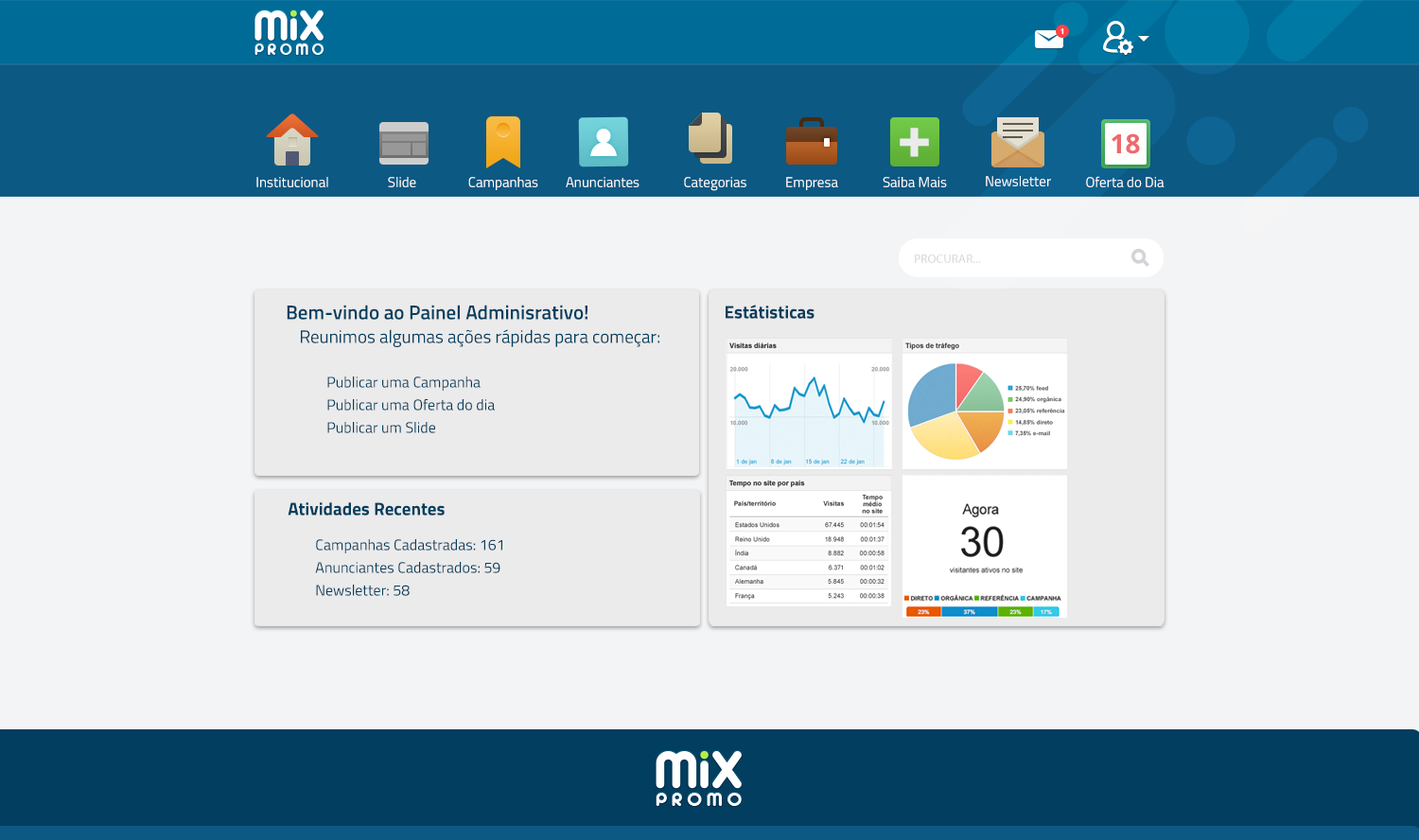
<style>
.page{position:relative;width:1419px;height:840px;background:#f3f4f5}
.page>*{position:absolute;margin:0}
.t1{font:7.6px "OpenSans-Bold";color:#ffffff}
.t2{font:62.7px "TitilliumWeb-Bold";color:#ebebeb}
.t3{font:26.5px "OpenSans-Bold";color:#f0686b;text-transform:uppercase}
.t4{font:14.2px "TitilliumWeb-Regular";color:#ffffff}
.t5{font:12.3px "MyriadPro-Regular";letter-spacing:0.013em;color:#d2d4d8;text-transform:uppercase}
.t6{font:19.9px "TitilliumWeb-SemiBold";color:#023e5f}
.t7{font:18px "TitilliumWeb-Bold";color:#023e5f}
.t8{font:18px "TitilliumWeb-Regular";color:#023e5f}
.t9{font:15.1px/22.7px "TitilliumWeb-Regular";color:#023e5f}
</style>
<div class="page">
<p class="t1" style="left:1061px;top:28px;width:3px;height:7px">1</p>
<p class="t2" style="left:900px;top:128px;width:29px;height:29px">+</p>
<p class="t3" style="left:1112px;top:133px;width:28px;height:21px">18</p>
<p class="t4" style="left:256px;top:177px;width:72px;height:10px">Institucional</p>
<p class="t4" style="left:388px;top:177px;width:28px;height:10px">Slide</p>
<p class="t4" style="left:468px;top:177px;width:70px;height:13px">Campanhas</p>
<p class="t4" style="left:566px;top:177px;width:74px;height:10px">Anunciantes</p>
<p class="t4" style="left:684px;top:177px;width:63px;height:14px">Categorias</p>
<p class="t4" style="left:786px;top:177px;width:52px;height:13px">Empresa</p>
<p class="t4" style="left:883px;top:177px;width:64px;height:10px">Saiba Mais</p>
<p class="t4" style="left:986px;top:176px;width:65px;height:10px">Newsletter</p>
<p class="t4" style="left:1086px;top:176px;width:79px;height:11px">Oferta do Dia</p>
<p class="t5" style="left:915px;top:255px;width:66px;height:8px">PROCURAR...</p>
<p class="t6" style="left:287px;top:305px;width:301px;height:15px">Bem-vindo ao Painel Adminisrativo!</p>
<p class="t7" style="left:726px;top:305px;width:89px;height:14px">Estátisticas</p>
<p class="t8" style="left:301px;top:329px;width:358px;height:18px">Reunimos algumas ações rápidas para começar:</p>
<p class="t9" style="left:327px;top:377px;width:168px;height:56px">Publicar uma Campanha<br>Publicar uma Oferta do dia<br>Publicar um Slide</p>
<p class="t7" style="left:288px;top:502px;width:157px;height:14px">Atividades Recentes</p>
<p class="t9" style="left:315px;top:539px;width:187px;height:57px">Campanhas Cadastradas: 161<br>Anunciantes Cadastrados: 59<br>Newsletter: 58</p>
</div>
